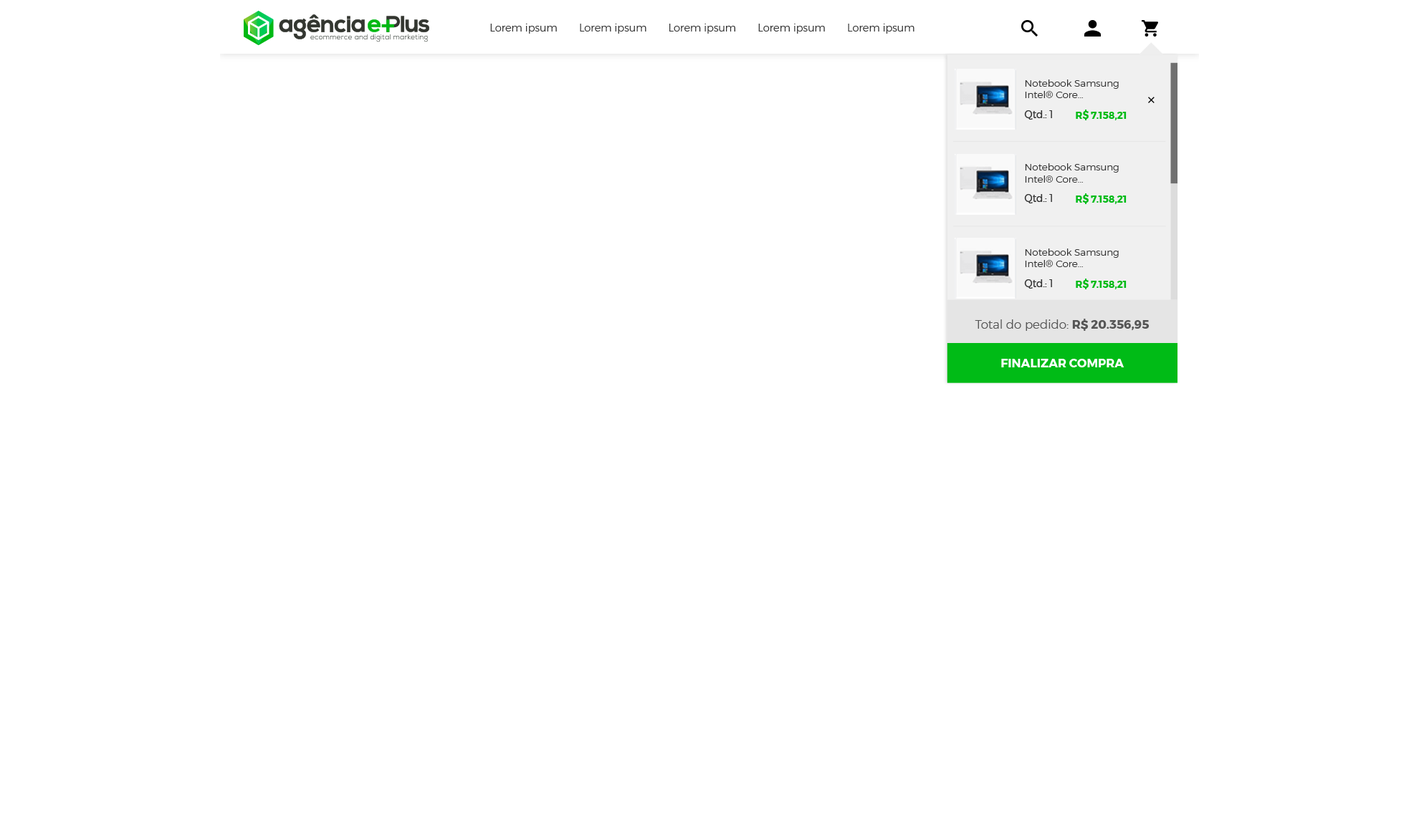
<style>
.page{position:relative;width:1419px;height:840px;background:#ffffff}
.page>*{position:absolute;margin:0}
.t1{font:10.4px "Montserrat-Light";color:#333333}
.t2{font:9.7px "Montserrat-Light";color:#333333}
.t3{font:9.7px "Montserrat-Regular";color:#333333}
.t4{font:9.7px "Montserrat-Bold";color:#00bb16}
.t5{font:11.9px "Montserrat-Light";color:#565656}
.t6{font:11.9px "Montserrat-Bold";color:#565656}
.t7{font:11.9px "Montserrat-Bold";color:#ffffff}
</style>
<div class="page">
<p class="t1" style="left:490px;top:24px;width:67px;height:10px">Lorem ipsum</p>
<p class="t1" style="left:580px;top:24px;width:66px;height:10px">Lorem ipsum</p>
<p class="t1" style="left:669px;top:24px;width:66px;height:10px">Lorem ipsum</p>
<p class="t1" style="left:758px;top:24px;width:67px;height:10px">Lorem ipsum</p>
<p class="t1" style="left:848px;top:24px;width:66px;height:10px">Lorem ipsum</p>
<p class="t2" style="left:1025px;top:80px;width:94px;height:18px">Notebook Samsung Intel® Core...</p>
<p class="t3" style="left:1024px;top:110px;width:28px;height:10px">Qtd.: 1</p>
<p class="t4" style="left:1076px;top:110px;width:50px;height:10px">R$ 7.158,21</p>
<p class="t2" style="left:1025px;top:163px;width:94px;height:20px">Notebook Samsung Intel® Core...</p>
<p class="t3" style="left:1024px;top:194px;width:28px;height:9px">Qtd.: 1</p>
<p class="t4" style="left:1076px;top:193px;width:50px;height:11px">R$ 7.158,21</p>
<p class="t2" style="left:1025px;top:249px;width:94px;height:18px">Notebook Samsung Intel® Core...</p>
<p class="t3" style="left:1024px;top:279px;width:28px;height:10px">Qtd.: 1</p>
<p class="t4" style="left:1076px;top:279px;width:50px;height:10px">R$ 7.158,21</p>
<p class="t5" style="left:974px;top:319px;width:175px;height:12px">Total do pedido: <span class="t6">R$ 20.356,95</span></p>
<p class="t7" style="left:1001px;top:359px;width:123px;height:9px">FINALIZAR COMPRA</p>
</div>
